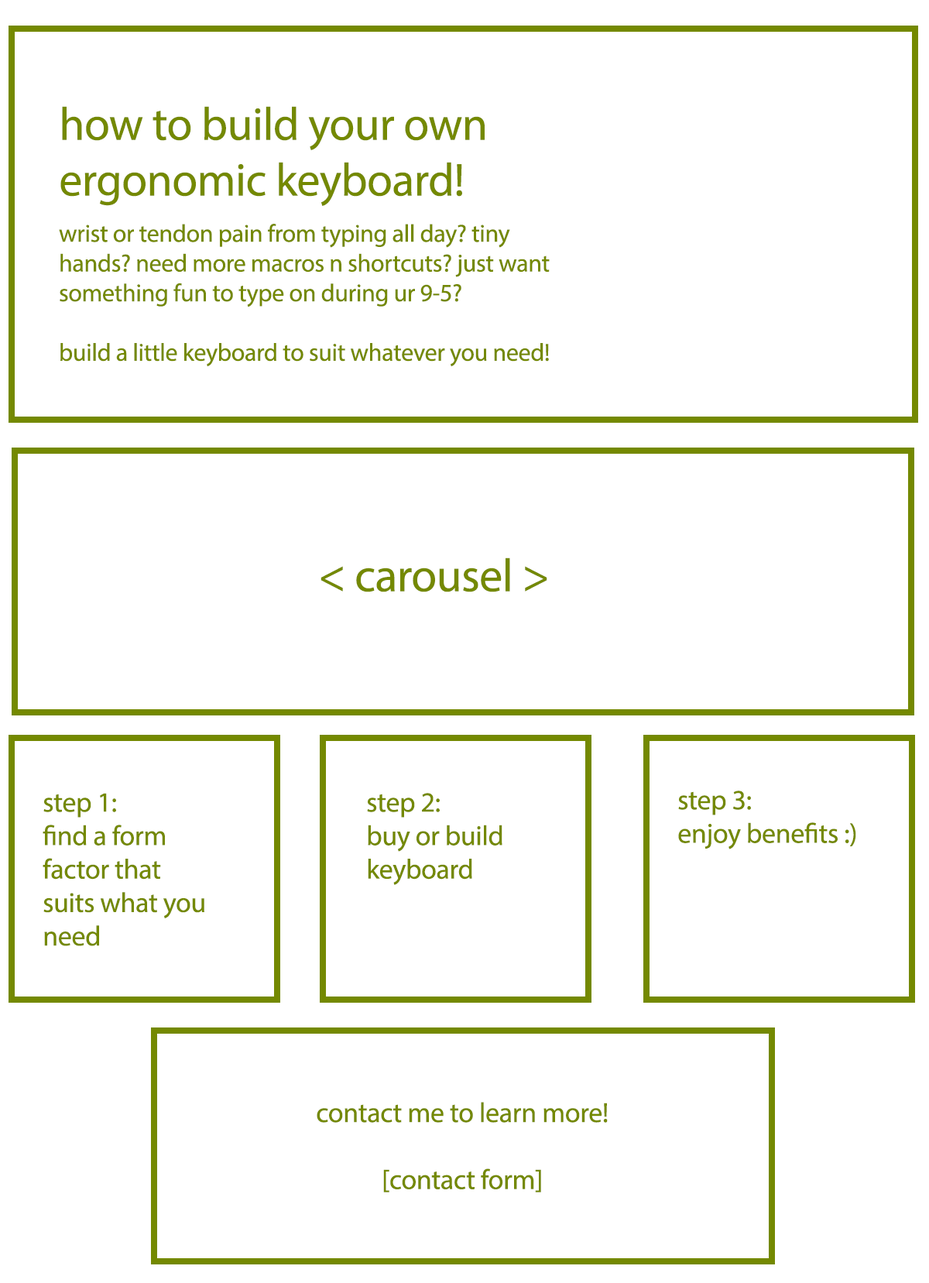
<style>
.page{position:relative;width:929px;height:1283px;background:#ffffff}
.page>*{position:absolute;margin:0}
.t1{font:46.5px "MyriadPro-Regular";letter-spacing:-0.01em;color:#748900}
.t2{font:24.8px "MyriadPro-Regular";letter-spacing:-0.01em;color:#748900}
.t3{font:27.9px "MyriadPro-Regular";letter-spacing:-0.01em;color:#748900}
</style>
<div class="page">
<p class="t1" style="left:60px;top:106px;width:425px;height:100px">how to build your own ergonomic keyboard!</p>
<p class="t2" style="left:59px;top:224px;width:491px;height:142px">wrist or tendon pain from typing all day? tiny hands? need more macros n shortcuts? just want something fun to type on during ur 9-5?  <br><br>build a little keyboard to suit whatever you need!</p>
<p class="t1" style="left:321px;top:558px;width:227px;height:34px">&lt; carousel &gt;</p>
<p class="t3" style="left:43px;top:793px;width:161px;height:153px">step 1: <br>find a form factor that suits what you need</p>
<p class="t3" style="left:367px;top:793px;width:136px;height:92px">step 2: <br>buy or build keyboard</p>
<p class="t3" style="left:678px;top:791px;width:178px;height:59px">step 3: <br>enjoy benefits :)</p>
<p class="t3" style="left:317px;top:1102px;width:291px;height:91px;text-align:center">contact me to learn more!<br><br>[contact form]</p>
</div>
